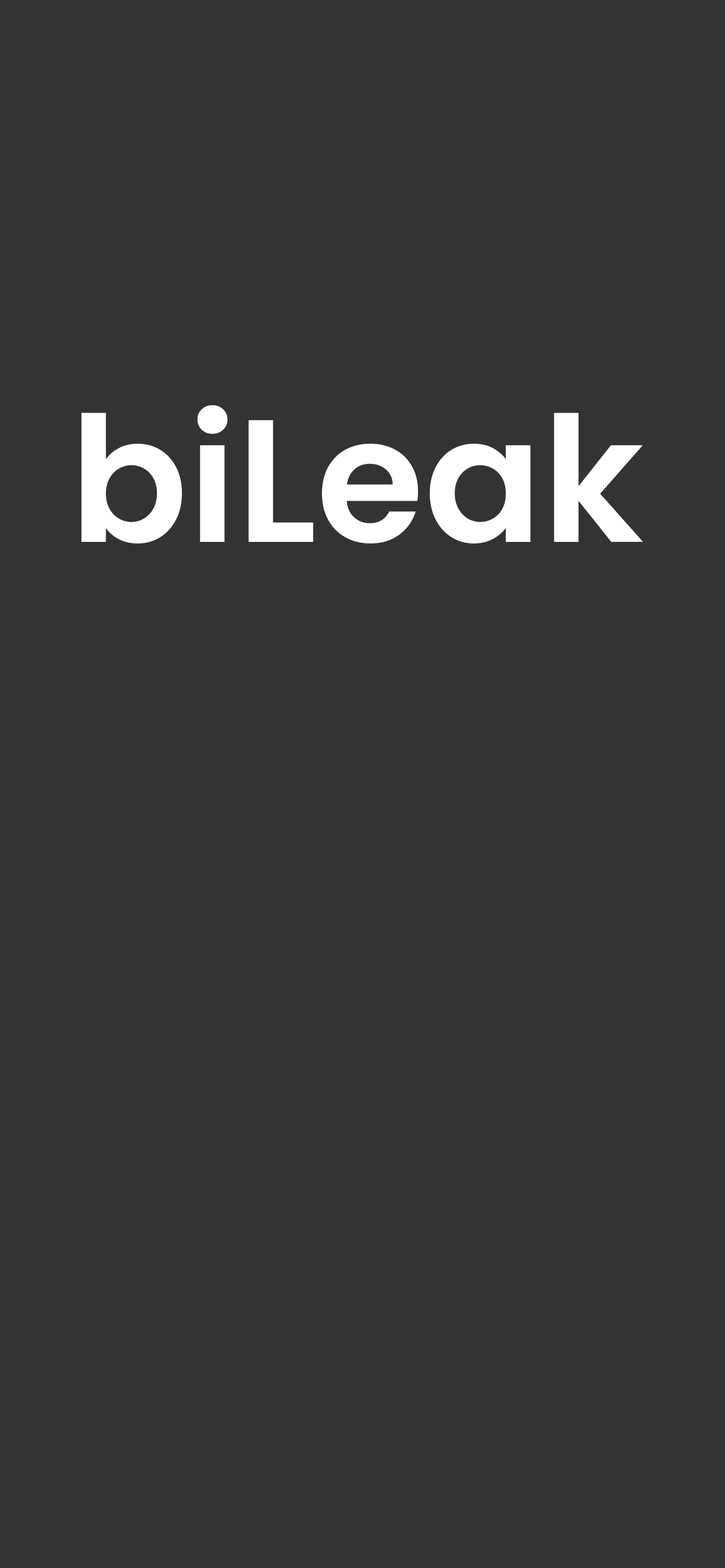
<style>
.page{position:relative;width:725px;height:1568px;background:#333333}
.page>*{position:absolute;margin:0}
.t1{font:174.3px "Poppins-SemiBold";color:#ffffff}
</style>
<div class="page">
<p class="t1" style="left:81px;top:405px;width:562px;height:139px">biLeak</p>
</div>
